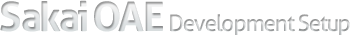
<style>
.page{position:relative;width:350px;height:35px;background:#ffffff}
.page>*{position:absolute;margin:0}
.t1{font:40.8px "Aller-Bold";letter-spacing:-0.08em}
.t2{font:22.7px "Aller";letter-spacing:-0.06em}
</style>
<div class="page">
<p class="t1" style="left:0px;top:0px;width:163px;height:32px">Sakai OAE</p>
<p class="t2" style="left:170px;top:14px;width:180px;height:23px">Development Setup</p>
</div>
